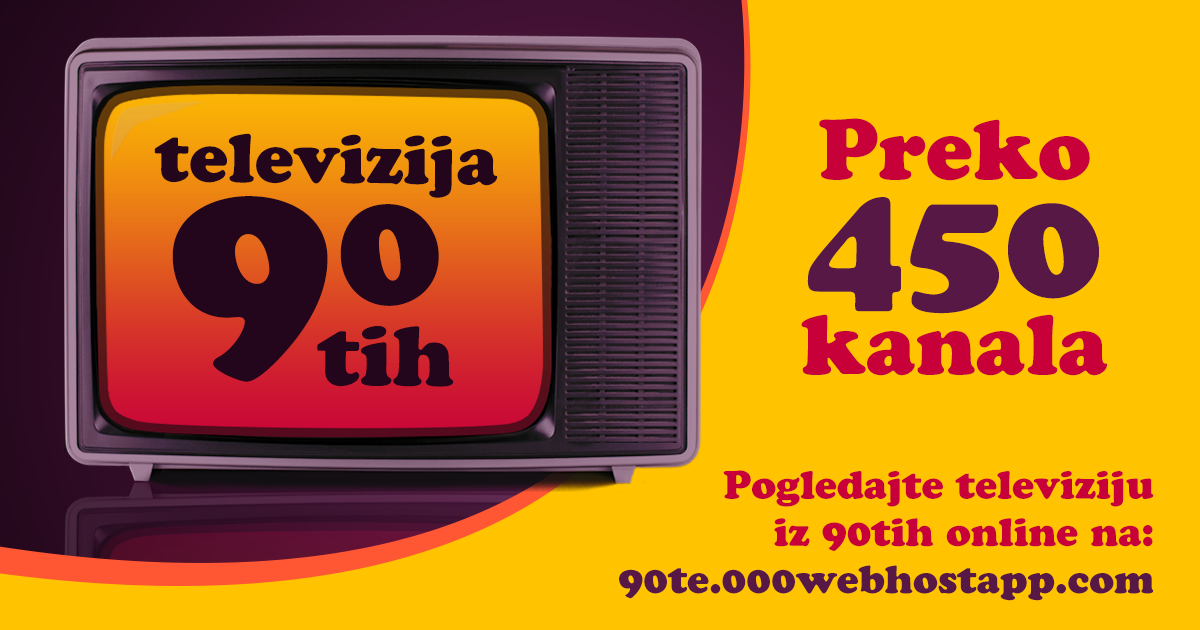
<style>
.page{position:relative;width:1200px;height:630px;background:#ffc300}
.page>*{position:absolute;margin:0}
.t1{font:84.4px/78px "CooperBlackStd";color:#c70039}
.t2{font:84.4px/74px "CooperBlackStd";color:#c70039}
.t3{font:157.4px/117px "CooperBlackStd";color:#571845}
.t4{font:68.7px "CooperBlackStd";color:#24061c}
.t5{font:257.2px "CooperBlackStd";color:#24061c}
.t6{font:168.4px "CooperBlackStd";color:#24061c}
.t7{font:84.6px "CooperBlackStd";color:#24061c}
.t8{font:39.4px "CooperBlackStd";color:#c70039}
.t9{font:39.4px "CooperBlackStd";color:#571845}
</style>
<div class="page">
<p class="t1" style="left:801px;top:118px;width:306px;height:258px;text-align:center"><span class="t2">Preko<br></span><span class="t3">450<br></span>kanala</p>
<p class="t4" style="left:154px;top:133px;width:344px;height:65px;rotate:1deg">televizija</p>
<p class="t5" style="left:172px;top:196px;width:156px;height:186px;rotate:1deg">9</p>
<p class="t6" style="left:340px;top:204px;width:99px;height:102px;rotate:1deg">0</p>
<p class="t7" style="left:317px;top:326px;width:137px;height:61px;rotate:1deg">tih</p>
<p class="t8" style="left:619px;top:470px;width:535px;height:131px;text-align:right">Pogledajte televiziju<br>iz 90tih online na:<br><span class="t9">90te.000webhostapp.com</span></p>
</div>
